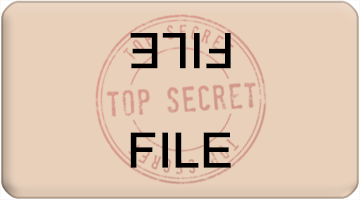
<style>
.page{position:relative;width:360px;height:200px;background:#e8d0bb}
.page>*{position:absolute;margin:0}
.t1{font:48px "ArialMT";color:#000000;font-weight:bold}
</style>
<div class="page">
<p class="t1" style="left:130px;top:33px;width:101px;height:36px;rotate:180deg">FILE</p>
<p class="t1" style="left:130px;top:132px;width:101px;height:36px">FILE</p>
</div>
